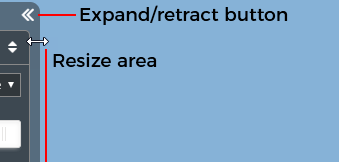
<style>
.page{position:relative;width:339px;height:162px;background:#86b2d7}
.page>*{position:absolute;margin:0}
.t1{font:18.7px "Montserrat-Regular";color:#000000}
</style>
<div class="page">
<p class="t1" style="left:80px;top:5px;width:208px;height:20px">Expand/retract button</p>
<p class="t1" style="left:53px;top:53px;width:104px;height:14px">Resize area</p>
</div>
